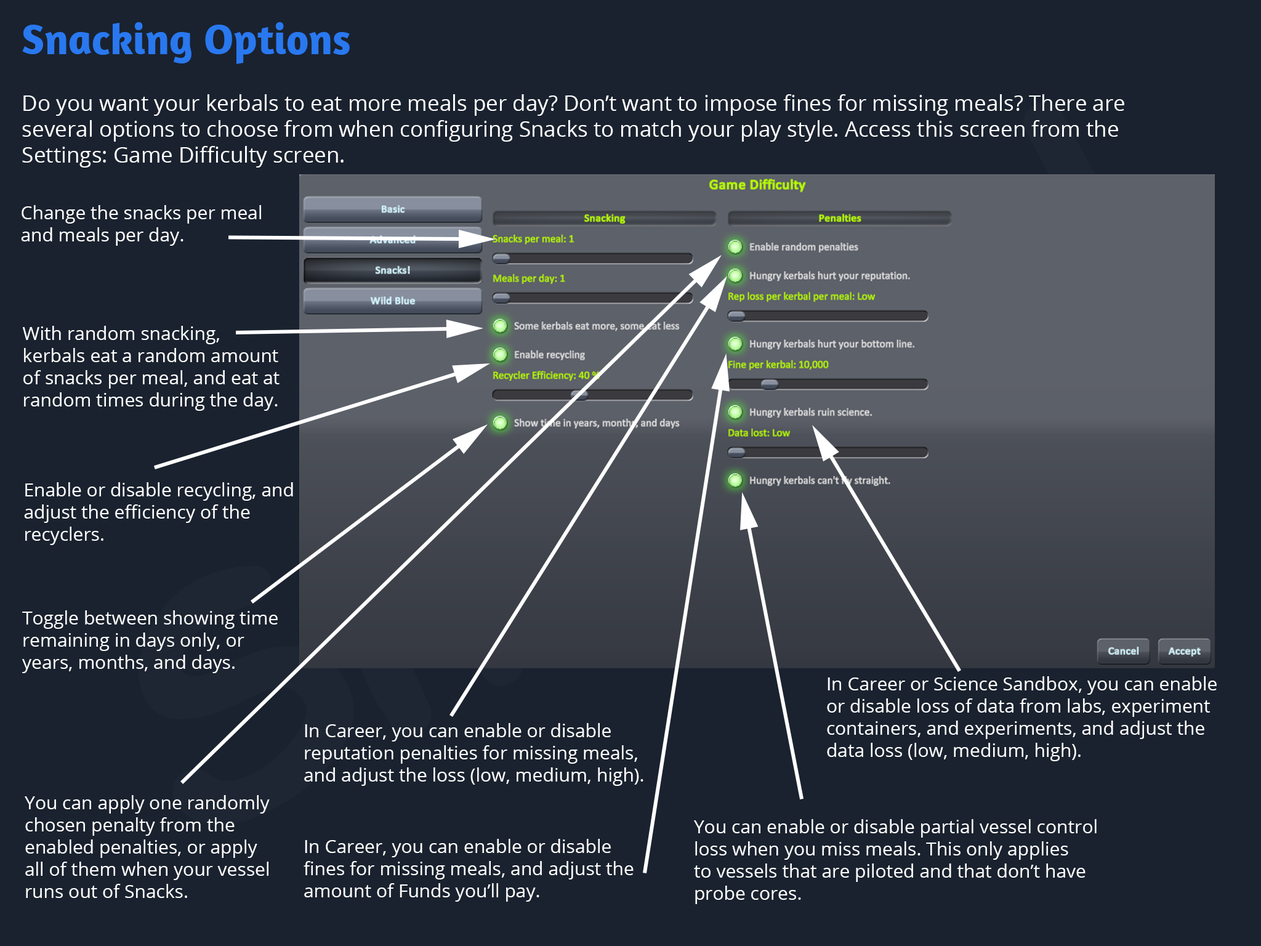
<style>
.page{position:relative;width:1261px;height:946px;background:#1a222f}
.page>*{position:absolute;margin:0}
.t1{font:43.1px "Amaranth-Bold";color:#2978ef}
.t2{font:21.5px "OpenSans";color:#ffffff}
.t3{font:18.5px "OpenSans";color:#ffffff}
</style>
<div class="page">
<p class="t1" style="left:22px;top:22px;width:328px;height:42px">Snacking Options</p>
<p class="t2" style="left:22px;top:94px;width:1102px;height:73px">Do you want your kerbals to eat more meals per day? Don’t want to impose fines for missing meals? There are several options to choose from when configuring Snacks to match your play style. Access this screen from the<br>Settings: Game Difficulty screen.</p>
<p class="t3" style="left:21px;top:205px;width:240px;height:41px">Change the snacks per meal<br>and meals per day.</p>
<p class="t3" style="left:23px;top:326px;width:257px;height:85px">With random snacking,<br>kerbals eat a random amount<br>of snacks per meal, and eat at<br>random times during the day.</p>
<p class="t3" style="left:24px;top:482px;width:269px;height:63px">Enable or disable recycling, and<br>adjust the efficiency of the<br>recyclers.</p>
<p class="t3" style="left:22px;top:610px;width:256px;height:63px">Toggle between showing time<br>remaining in days only, or<br>years, months, and days.</p>
<p class="t3" style="left:827px;top:676px;width:390px;height:85px">In Career or Science Sandbox, you can enable<br>or disable loss of data from labs, experiment<br>containers, and experiments, and adjust the<br>data loss (low, medium, high).</p>
<p class="t3" style="left:304px;top:723px;width:339px;height:63px">In Career, you can enable or disable<br>reputation penalties for missing meals,<br>and adjust the loss (low, medium, high).</p>
<p class="t3" style="left:25px;top:795px;width:245px;height:103px">You can apply one randomly<br>chosen penalty from the<br>enabled penalties, or apply<br>all of them when your vessel<br>runs out of Snacks.</p>
<p class="t3" style="left:694px;top:819px;width:403px;height:85px">You can enable or disable partial vessel control<br>loss when you miss meals. This only applies<br>to vessels that are piloted and that don’t have<br>probe cores.</p>
<p class="t3" style="left:304px;top:839px;width:330px;height:62px">In Career, you can enable or disable<br>fines for missing meals, and adjust the <br>amount of Funds you’ll pay.</p>
</div>
